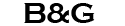
<style>
.page{position:relative;width:125px;height:26px;background:#ffffff}
.page>*{position:absolute;margin:0}
.t1{font:30px "CopperplateGothic-Bold";color:#000000}
</style>
<div class="page">
<p class="t1" style="left:24px;top:3px;width:71px;height:20px">B&amp;G</p>
</div>
